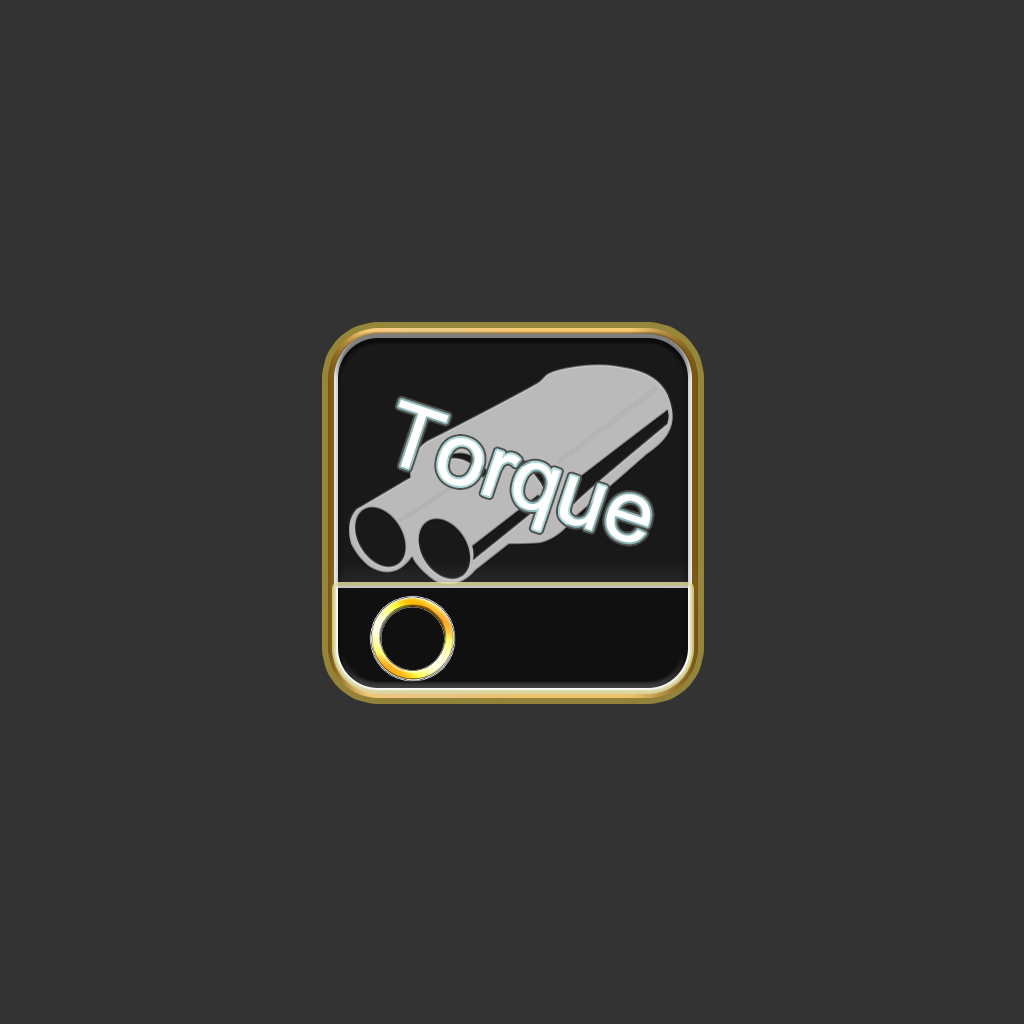
<style>
.page{position:relative;width:1024px;height:1024px;background:#333333}
.page>*{position:absolute;margin:0}
.t1{font:88.4px "ArialMT";color:#ffffff}
</style>
<div class="page">
<p class="t1" style="left:398px;top:399px;width:253px;height:144px;rotate:18deg">Torque</p>
</div>
